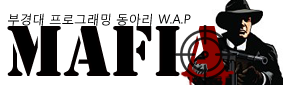
<style>
.page{position:relative;width:283px;height:85px;background:#ffffff}
.page>*{position:absolute;margin:0}
.t1{font:25px "malgungothic";color:#000000}
.t2{font:75px "Stencil";color:#000000}
</style>
<div class="page">
<p class="t1" style="left:8px;top:13px;width:183px;height:13px">부경대 프로그래밍 동아리 W.A.P</p>
<p class="t2" style="left:7px;top:26px;width:173px;height:50px">MAFI</p>
</div>
